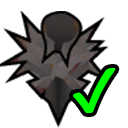
<style>
.page{position:relative;width:128px;height:128px;background:#ffffff}
.page>*{position:absolute;margin:0}
.t1{font:59.7px "SegoeUISymbol";color:#00ff00}
</style>
<div class="page">
<p class="t1" style="left:73px;top:68px;width:43px;height:45px">✔</p>
</div>
